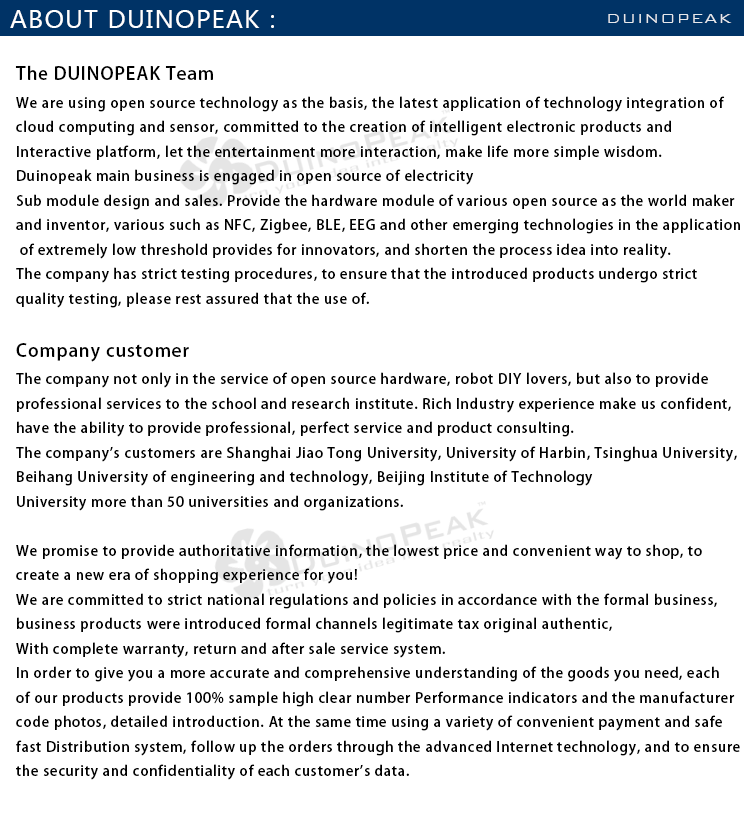
<style>
.page{position:relative;width:744px;height:814px;background:#ffffff}
.page>*{position:absolute;margin:0}
.t1{font:24px "MicrosoftYaHei";letter-spacing:0.05em;color:#ffffff}
.t2{font:18px "BankGothicBT-Light";letter-spacing:0.05em;color:#e6e8ec}
.t3{font:14px "AdobeHeitiStd-Regular";letter-spacing:0.05em;color:#000000}
.t4{font:18px "AdobeHeitiStd-Regular";letter-spacing:0.05em;color:#000000}
</style>
<div class="page">
<p class="t1" style="left:10px;top:10px;width:264px;height:18px">ABOUT DUINOPEAK：</p>
<p class="t2" style="left:608px;top:14px;width:124px;height:9px">DUINOPEAK</p>
<p class="t3" style="left:15px;top:65px;width:725px;height:715px"><span class="t4">The DUINOPEAK Team<br></span>We are using open source technology as the basis, the latest application of technology integration of <br>cloud computing and sensor, committed to the creation of intelligent electronic products and<br>Interactive platform, let the entertainment more interaction, make life more simple wisdom. <br>Duinopeak main business is engaged in open source of electricity<br>Sub module design and sales. Provide the hardware module of various open source as the world maker <br>and inventor, various such as NFC, Zigbee, BLE, EEG and other emerging technologies in the application<br> of extremely low threshold provides for innovators, and shorten the process idea into reality.<br>The company has strict testing procedures, to ensure that the introduced products undergo strict <br>quality testing, please rest assured that the use of.<br><br><span class="t4">Company customer<br></span>The company not only in the service of open source hardware, robot DIY lovers, but also to provide <br>professional services to the school and research institute. Rich Industry experience make us confident, <br>have the ability to provide professional, perfect service and product consulting.<br>The company's customers are Shanghai Jiao Tong University, University of Harbin, Tsinghua University, <br>Beihang University of engineering and technology, Beijing Institute of Technology<br>University more than 50 universities and organizations.<br><br>We promise to provide authoritative information, the lowest price and convenient way to shop, to <br>create a new era of shopping experience for you!<br>We are committed to strict national regulations and policies in accordance with the formal business, <br>business products were introduced formal channels legitimate tax original authentic,<br>With complete warranty, return and after sale service system.<br>In order to give you a more accurate and comprehensive understanding of the goods you need, each <br>of our products provide 100% sample high clear number Performance indicators and the manufacturer <br>code photos, detailed introduction. At the same time using a variety of convenient payment and safe <br>fast Distribution system, follow up the orders through the advanced Internet technology, and to ensure <br>the security and confidentiality of each customer's data.</p>
</div>
